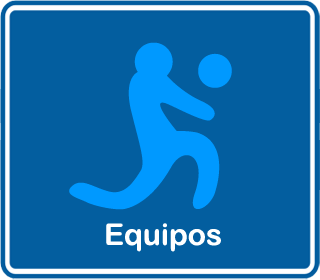
<style>
.page{position:relative;width:320px;height:280px;background:#035e9f}
.page>*{position:absolute;margin:0}
.t1{font:30px "ArialRoundedMTBold";color:#ffffff}
</style>
<div class="page">
<p class="t1" style="left:106px;top:223px;width:115px;height:29px">Equipos</p>
</div>
